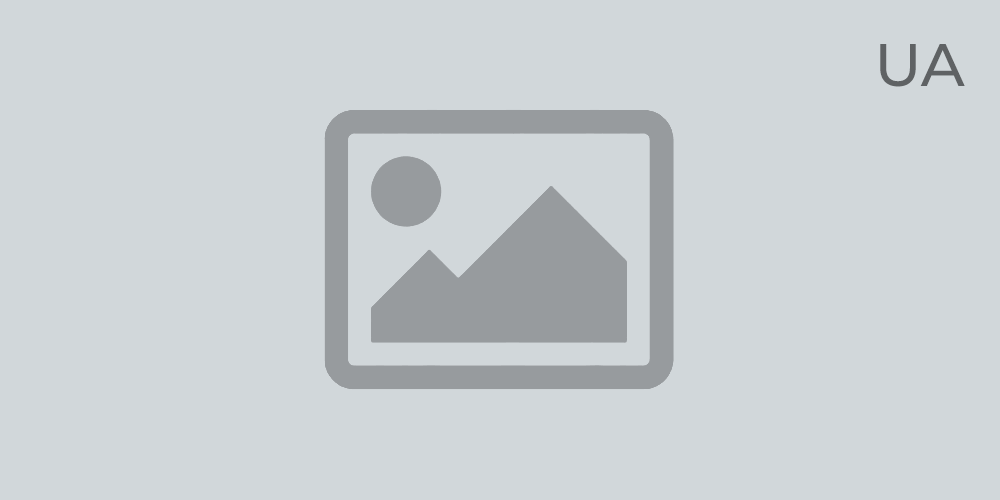
<style>
.page{position:relative;width:1000px;height:500px;background:#d1d7da}
.page>*{position:absolute;margin:0}
.t1{font:60px "Montserrat-Medium";color:#5f6264}
</style>
<div class="page">
<p class="t1" style="left:880px;top:44px;width:85px;height:43px">UA</p>
</div>
